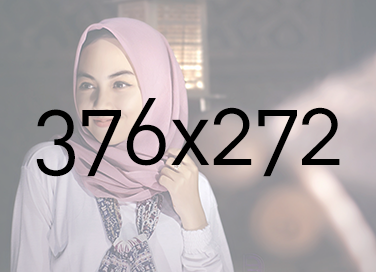
<style>
.page{position:relative;width:376px;height:272px}
.page>*{position:absolute;margin:0}
.t1{font:92px "DIN-RegularAlternate";letter-spacing:-0.025em;color:#000000}
</style>
<div class="page">
<p class="t1" style="left:36px;top:98px;width:304px;height:79px">376x272</p>
</div>
